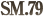
<style>
.page{position:relative;width:52px;height:16px;background:#ffffff}
.page>*{position:absolute;margin:0}
.t1{font:18px "RyuminPro-ExBold";letter-spacing:-0.06em;color:#4a3f32;font-weight:bold;scale:0.9 1}
</style>
<div class="page">
<p class="t1" style="left:0px;top:1px;width:43px;height:15px">SM.79</p>
</div>
